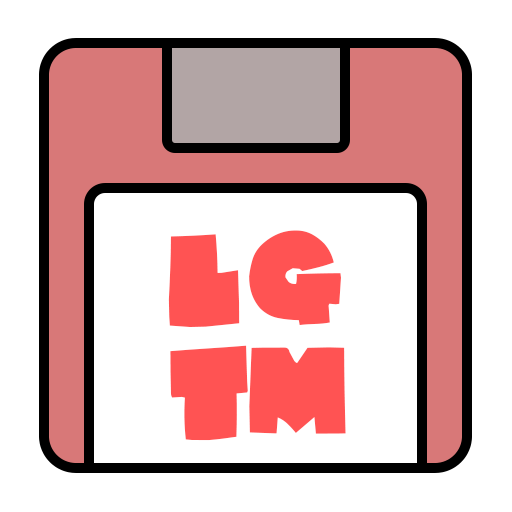
<style>
.page{position:relative;width:512px;height:512px;background:#ffffff}
.page>*{position:absolute;margin:0}
.t1{font:106.4px/112.5px "IGAFONT";letter-spacing:-0.14em;color:#ff5353}
</style>
<div class="page">
<p class="t1" style="left:168px;top:230px;width:178px;height:211px;text-align:center;rotate:-1deg">ＬＧ<br>ＴＭ</p>
</div>
